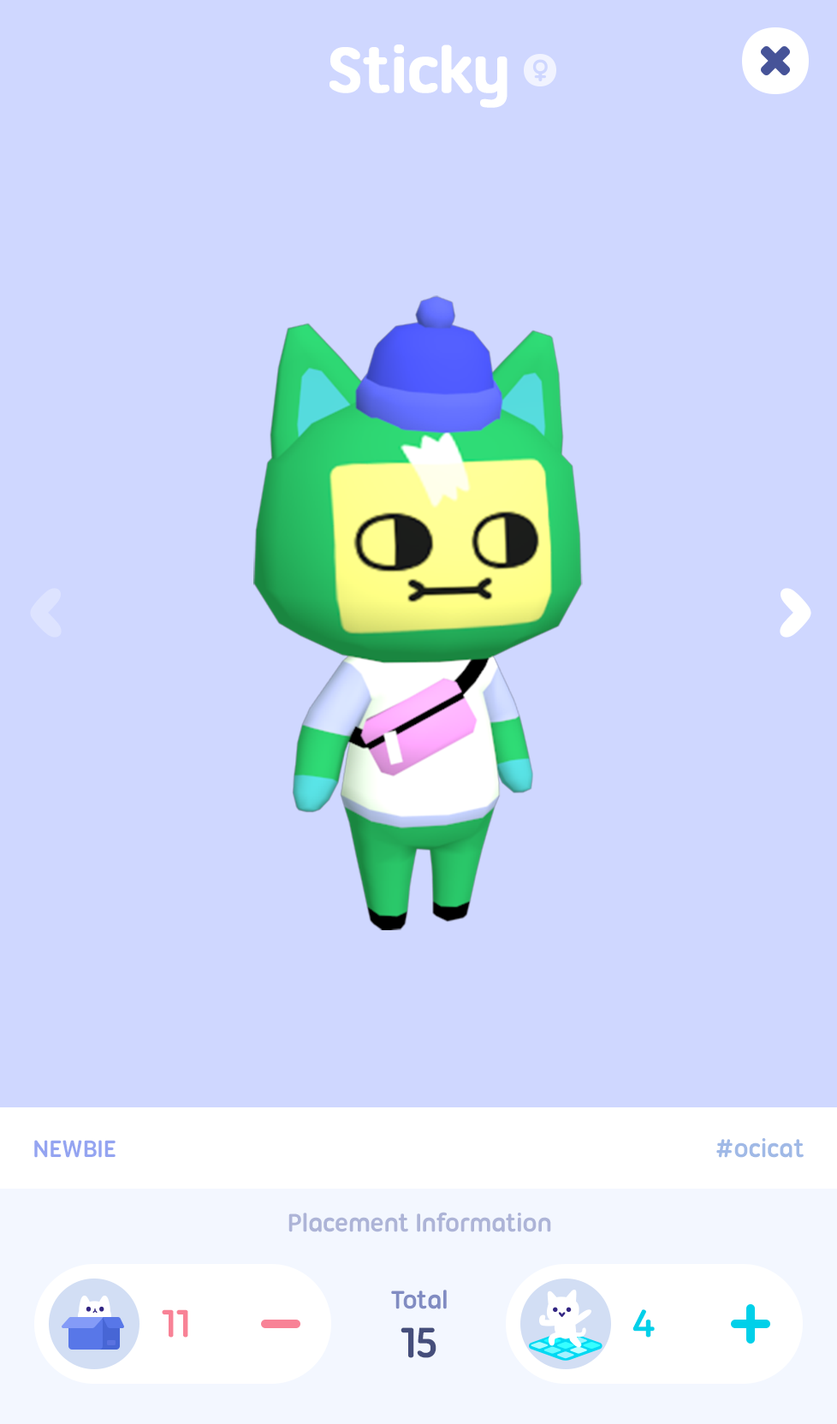
<style>
.page{position:relative;width:837px;height:1424px;background:#cfd7ff}
.page>*{position:absolute;margin:0}
.t1{font:68.5px "UbuntuTitling-Bold";letter-spacing:-0.025em;color:#ffffff;font-weight:bold}
.t2{font:25.7px "UbuntuTitling-Bold";letter-spacing:-0.025em;color:#94a4f1;text-transform:uppercase}
.t3{font:27.4px "UbuntuTitling-Bold";letter-spacing:-0.025em;color:#a0b9e6}
.t4{font:27.4px "UbuntuTitling-Bold";letter-spacing:-0.025em;color:#adb4d7}
.t5{font:27.4px "UbuntuTitling-Bold";letter-spacing:-0.025em;color:#818cc2}
.t6{font:41.7px "UbuntuTitling-Bold";letter-spacing:-0.025em;color:#f88296}
.t7{font:41.7px "UbuntuTitling-Bold";letter-spacing:-0.025em;color:#00d0e9}
.t8{font:46.2px "UbuntuTitling-Bold";letter-spacing:-0.025em;color:#454e7b}
</style>
<div class="page">
<p class="t1" style="left:330px;top:45px;width:178px;height:63px">Sticky</p>
<p class="t2" style="left:34px;top:1140px;width:82px;height:18px">Newbie</p>
<p class="t3" style="left:716px;top:1138px;width:88px;height:20px">#ocicat</p>
<p class="t4" style="left:288px;top:1212px;width:263px;height:21px">Placement Information</p>
<p class="t5" style="left:391px;top:1290px;width:56px;height:20px">Total</p>
<p class="t6" style="left:162px;top:1310px;width:26px;height:28px">11</p>
<p class="t7" style="left:633px;top:1310px;width:22px;height:28px">4</p>
<p class="t8" style="left:401px;top:1328px;width:36px;height:30px">15</p>
</div>
